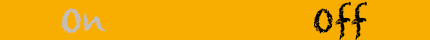
<style>
.page{position:relative;width:430px;height:40px;background:#f8ae01}
.page>*{position:absolute;margin:0}
.t1{font:30.9px "Chalkduster";letter-spacing:0.02em;color:#000000}
.t2{font:30.9px "Chalkduster";letter-spacing:0.02em;color:#bfbfbf}
</style>
<div class="page">
<p class="t1" style="left:62px;top:1px;width:306px;height:40px"><span class="t2">On       </span>Off</p>
</div>
